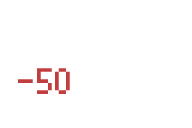
<style>
.page{position:relative;width:192px;height:128px;background:#ffffff}
.page>*{position:absolute;margin:0}
.t1{font:48px "Pixelade";color:#c23d3d;text-transform:uppercase}
</style>
<div class="page">
<p class="t1" style="left:18px;top:68px;width:52px;height:26px">-50</p>
</div>
